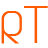
<style>
.page{position:relative;width:48px;height:48px;background:#ffffff}
.page>*{position:absolute;margin:0}
.t1{font:58px "VagebondCLight-Roman";color:#fe5a00}
</style>
<div class="page">
<p class="t1" style="left:1px;top:6px;width:47px;height:38px">rT</p>
</div>
